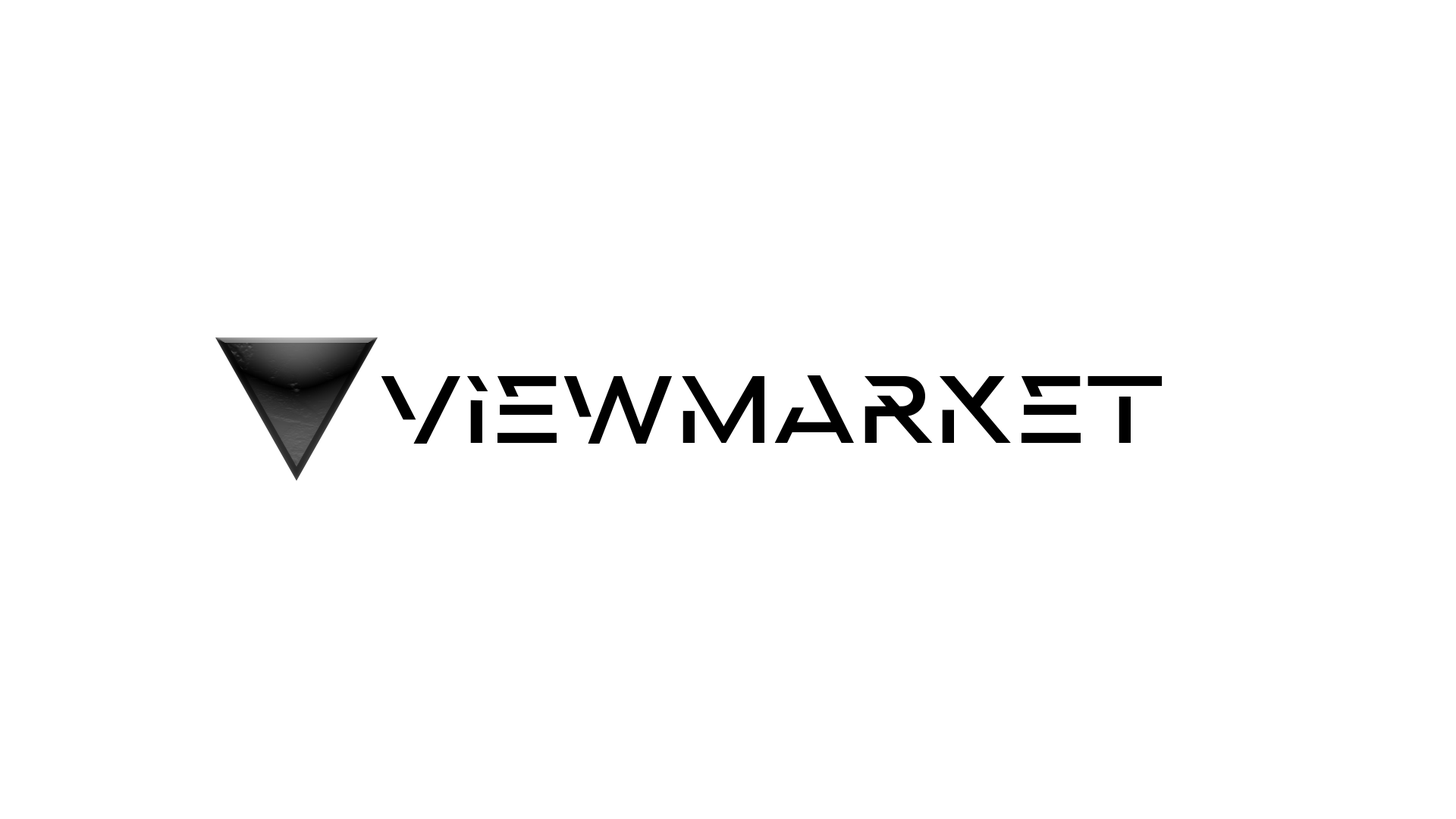
<style>
.page{position:relative;width:1456px;height:819px;background:#ffffff}
.page>*{position:absolute;margin:0}
.t1{font:94.8px "FiresideDEMO";color:#000000}
</style>
<div class="page">
<p class="t1" style="left:381px;top:375px;width:782px;height:69px">viewmarket</p>
</div>
